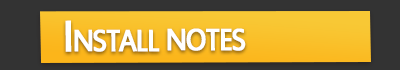
<style>
.page{position:relative;width:400px;height:70px;background:#333333}
.page>*{position:absolute;margin:0}
.t1{font:48px "EstrangeloEdessa";letter-spacing:-0.075em;color:#ffffff;font-variant:small-caps;font-weight:bold;scale:0.9 1}
</style>
<div class="page">
<p class="t1" style="left:65px;top:20px;width:181px;height:32px">Install notes</p>
</div>
